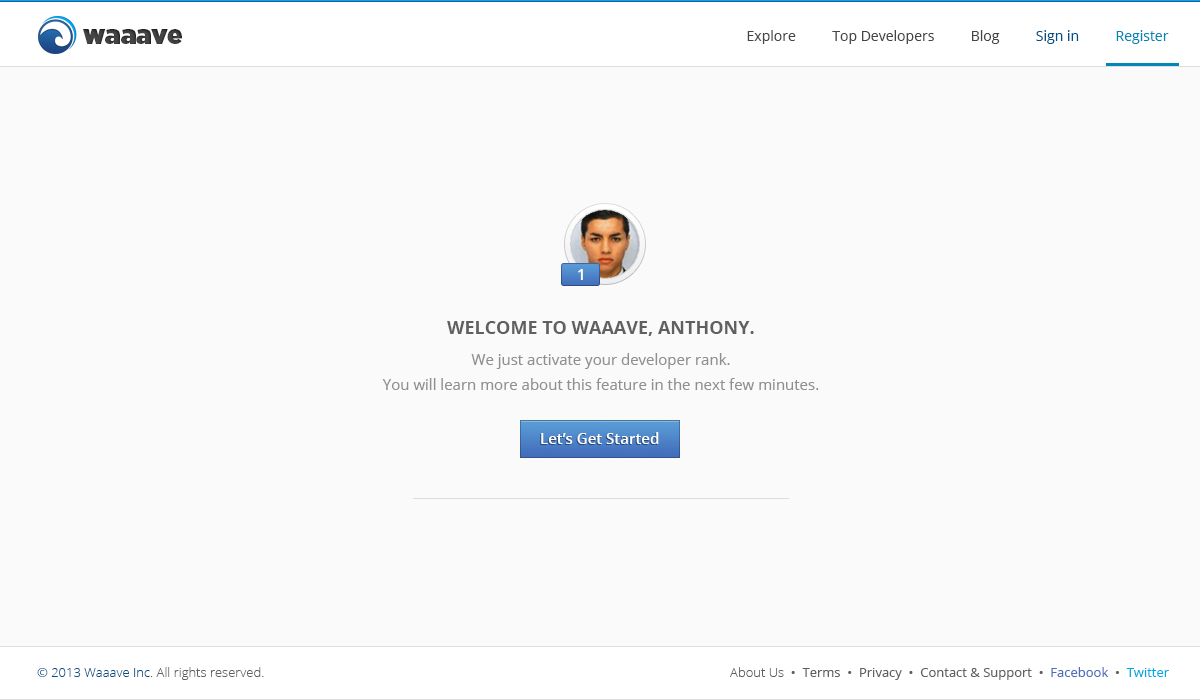
<style>
.page{position:relative;width:1200px;height:700px;background:#fafafa}
.page>*{position:absolute;margin:0}
.t1{font:25.9px "Gotham-Ultra";color:#454545}
.t2{font:14px "OpenSans";color:#454545}
.t3{font:14px "OpenSans";color:#005086}
.t4{font:14px "OpenSans";color:#0086b8}
.t5{font:15px "OpenSans-Semibold";color:#fefefe}
.t6{font:18px "OpenSans-Bold";color:#606060}
.t7{font:15px/25px "OpenSans";color:#909090}
.t8{font:15px "OpenSans-Semibold";color:#ffffff}
.t9{font:13px "OpenSans-Light";color:#606060}
.t10{font:13px "OpenSans-Light";color:#005086}
.t11{font:13px "OpenSans";color:#606060}
.t12{font:13px "OpenSans";color:#4e6dbb}
.t13{font:13px "OpenSans";color:#01abe1}
</style>
<div class="page">
<p class="t1" style="left:83px;top:29px;width:99px;height:15px">waaave</p>
<p class="t2" style="left:747px;top:30px;width:422px;height:14px">Explore          Top Developers          Blog          <span class="t3">Sign in          </span><span class="t4">Register</span></p>
<p class="t5" style="left:578px;top:269px;width:5px;height:11px">1</p>
<p class="t6" style="left:447px;top:321px;width:307px;height:15px">WELCOME TO WAAAVE, ANTHONY.</p>
<p class="t7" style="left:382px;top:353px;width:437px;height:37px;text-align:center">We just activate your developer rank.<br>You will learn more about this feature in the next few minutes.</p>
<p class="t8" style="left:541px;top:432px;width:118px;height:12px">Let’s Get Started</p>
<p class="t9" style="left:37px;top:667px;width:227px;height:13px"><span class="t10">© 2013 Waaave Inc</span>. All rights reserved.</p>
<p class="t11" style="left:730px;top:667px;width:439px;height:13px"><span class="t9">About Us  </span>•  Terms  •  Privacy  •  Contact &amp; Support  •  <span class="t12">Facebook</span>  •  <span class="t13">Twitter</span></p>
</div>
